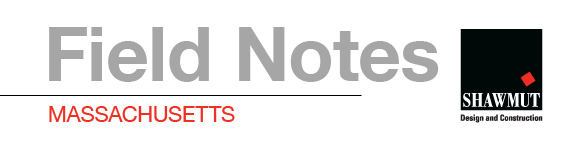
<style>
.page{position:relative;width:581px;height:148px;background:#ffffff}
.page>*{position:absolute;margin:0}
.t1{font:75px "HelveticaNeueLTCom-Bd";color:#a6a6a6}
.t2{font:21.6px "HelveticaNeueLTCom-Roman";color:#ee3124;text-transform:uppercase}
</style>
<div class="page">
<p class="t1" style="left:49px;top:27px;width:390px;height:55px">Field Notes</p>
<p class="t2" style="left:49px;top:106px;width:186px;height:16px">Massachusetts</p>
</div>
